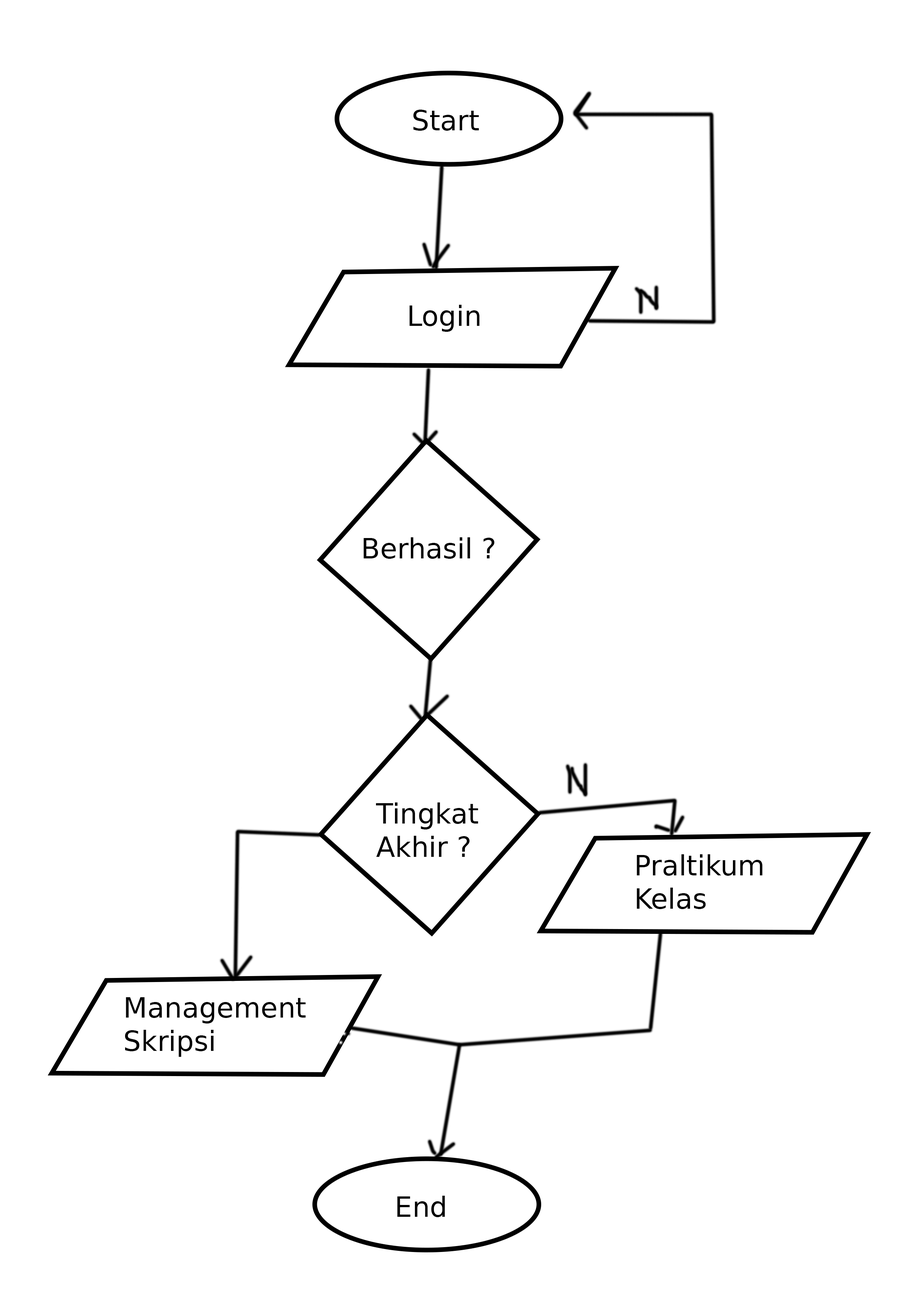
<style>
.page{position:relative;width:918px;height:1299px;background:#ffffff}
.page>*{position:absolute;margin:0}
.t1{font:27.8px "BitstreamVeraSans-Roman";color:#000000}
</style>
<div class="page">
<p class="t1" style="left:413px;top:110px;width:66px;height:21px">Start</p>
<p class="t1" style="left:409px;top:305px;width:71px;height:27px">Login</p>
<p class="t1" style="left:364px;top:537px;width:131px;height:22px">Berhasil ?</p>
<p class="t1" style="left:376px;top:802px;width:102px;height:55px">Tingkat <br>Akhir ?</p>
<p class="t1" style="left:637px;top:854px;width:126px;height:55px">Praltikum <br>Kelas</p>
<p class="t1" style="left:125px;top:997px;width:181px;height:60px">Management<br>Skripsi</p>
<p class="t1" style="left:397px;top:1195px;width:48px;height:22px">End</p>
</div>
